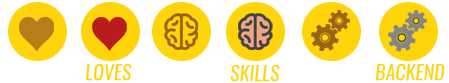
<style>
.page{position:relative;width:449px;height:83px;background:#ffffff}
.page>*{position:absolute;margin:0}
.t1{font:20px "Oswald-RegularItalic";color:#ffd40a}
</style>
<div class="page">
<p class="t1" style="left:85px;top:63px;width:47px;height:18px">LOVES</p>
<p class="t1" style="left:230px;top:64px;width:50px;height:18px">SKILLS</p>
<p class="t1" style="left:375px;top:63px;width:70px;height:18px">BACKEND</p>
</div>
